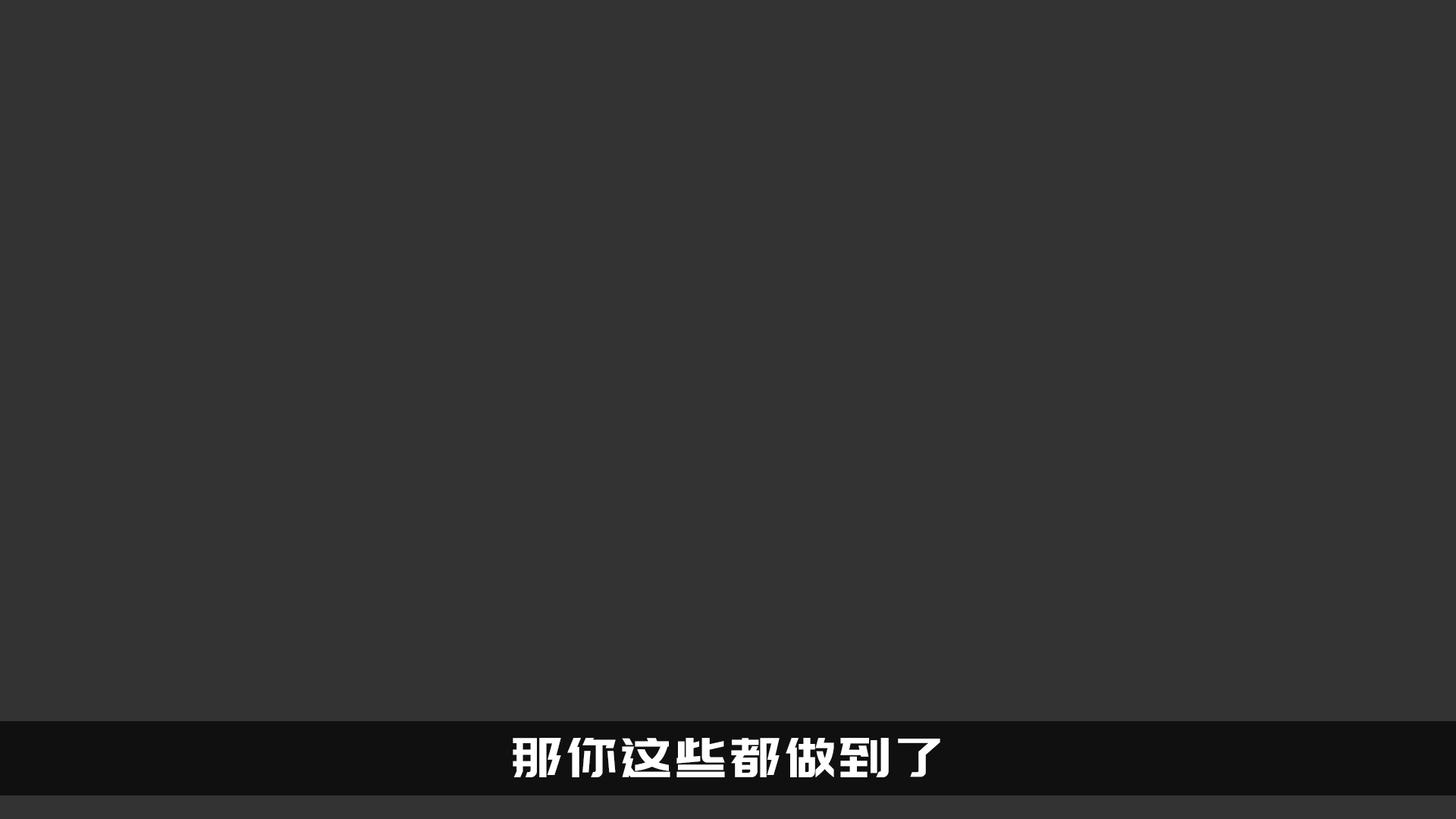
<style>
.page{position:relative;width:1456px;height:819px;background:#333333}
.page>*{position:absolute;margin:0}
.t1{font:54.6px "PangMenZhengDao-3";color:#ffffff}
</style>
<div class="page">
<p class="t1" style="left:513px;top:738px;width:427px;height:39px">那你这些都做到了</p>
</div>
